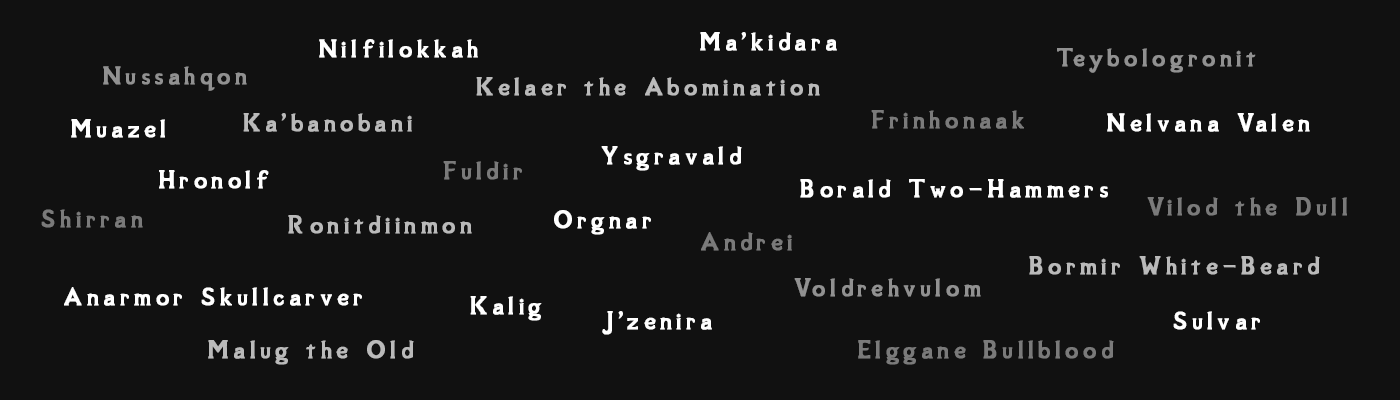
<style>
.page{position:relative;width:1400px;height:400px;background:#111111}
.page>*{position:absolute;margin:0}
.t1{font:32px "SovngardeLight";letter-spacing:0.14em;color:#ffffff;font-weight:bold}
.t2{font:32px "SovngardeLight";letter-spacing:0.14em;color:#919191;font-weight:bold}
.t3{font:32px "SovngardeLight";letter-spacing:0.14em;color:#bababa;font-weight:bold}
.t4{font:32px "SovngardeLight";letter-spacing:0.14em;color:#7a7a7a;font-weight:bold}
</style>
<div class="page">
<p class="t1" style="left:319px;top:39px;width:159px;height:19px">Nilfilokkah</p>
<p class="t1" style="left:700px;top:32px;width:137px;height:19px">Ma'kidara</p>
<p class="t2" style="left:1057px;top:48px;width:199px;height:25px">Teybologronit</p>
<p class="t2" style="left:103px;top:66px;width:144px;height:25px">Nussahqon</p>
<p class="t3" style="left:476px;top:77px;width:344px;height:19px">Kelaer the Abomination</p>
<p class="t3" style="left:243px;top:113px;width:169px;height:19px">Ka'banobani</p>
<p class="t4" style="left:871px;top:110px;width:153px;height:19px">Frinhonaak</p>
<p class="t1" style="left:1107px;top:113px;width:203px;height:19px">Nelvana Valen</p>
<p class="t1" style="left:71px;top:119px;width:94px;height:19px">Muazel</p>
<p class="t1" style="left:601px;top:146px;width:141px;height:25px">Ysgravald</p>
<p class="t4" style="left:443px;top:161px;width:79px;height:19px">Fuldir</p>
<p class="t1" style="left:159px;top:170px;width:110px;height:19px">Hronolf</p>
<p class="t1" style="left:800px;top:179px;width:308px;height:19px">Borald Two-Hammers</p>
<p class="t4" style="left:1147px;top:197px;width:200px;height:19px">Vilod the Dull</p>
<p class="t4" style="left:41px;top:209px;width:102px;height:19px">Shirran</p>
<p class="t3" style="left:288px;top:215px;width:184px;height:19px">Ronitdiinmon</p>
<p class="t1" style="left:554px;top:210px;width:97px;height:25px">Orgnar</p>
<p class="t4" style="left:701px;top:232px;width:91px;height:19px">Andrei</p>
<p class="t3" style="left:1029px;top:256px;width:291px;height:19px">Bormir White-Beard</p>
<p class="t2" style="left:794px;top:278px;width:187px;height:19px">Voldrehvulom</p>
<p class="t1" style="left:64px;top:287px;width:298px;height:19px">Anarmor Skullcarver</p>
<p class="t1" style="left:470px;top:296px;width:72px;height:25px">Kalig</p>
<p class="t1" style="left:602px;top:311px;width:110px;height:24px">J'zenira</p>
<p class="t1" style="left:1173px;top:311px;width:87px;height:19px">Sulvar</p>
<p class="t3" style="left:208px;top:340px;width:206px;height:25px">Malug the Old</p>
<p class="t4" style="left:858px;top:340px;width:256px;height:25px">Elggane Bullblood</p>
</div>
